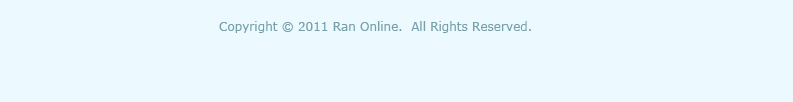
<style>
.page{position:relative;width:793px;height:102px;background:#ecf9ff}
.page>*{position:absolute;margin:0}
.t1{font:12px "Verdana";color:#77a0ab}
</style>
<div class="page">
<p class="t1" style="left:219px;top:21px;width:312px;height:12px">Copyright © 2011 Ran Online.  All Rights Reserved.</p>
</div>
